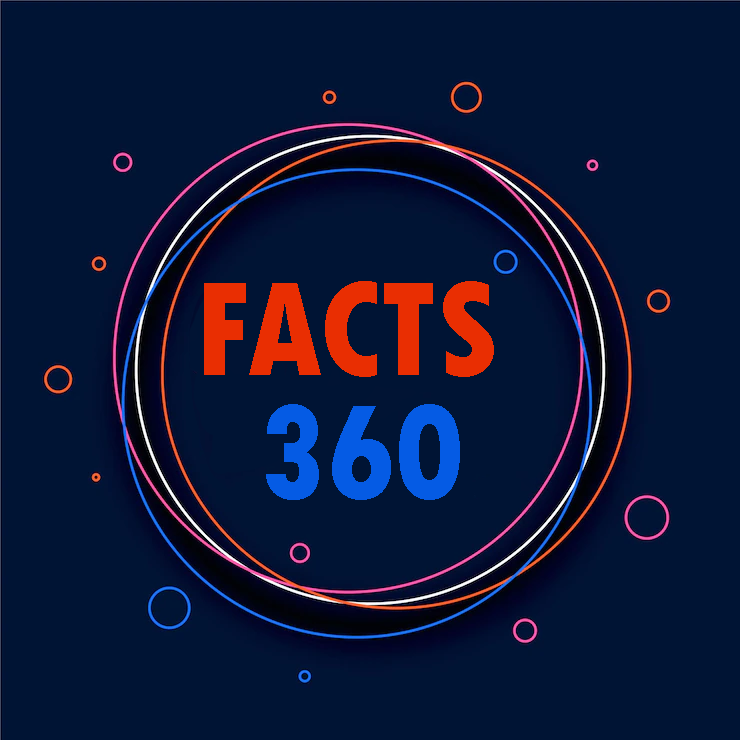
<style>
.page{position:relative;width:740px;height:740px;background:#001434}
.page>*{position:absolute;margin:0}
.t1{font:140.6px "TwCenMT-CondensedExtraBold";color:#e92e02}
.t2{font:140.6px "TwCenMT-CondensedExtraBold";color:#055be4}
</style>
<div class="page">
<p class="t1" style="left:204px;top:281px;width:290px;height:96px">FACTS</p>
<p class="t2" style="left:266px;top:404px;width:194px;height:96px">360</p>
</div>
